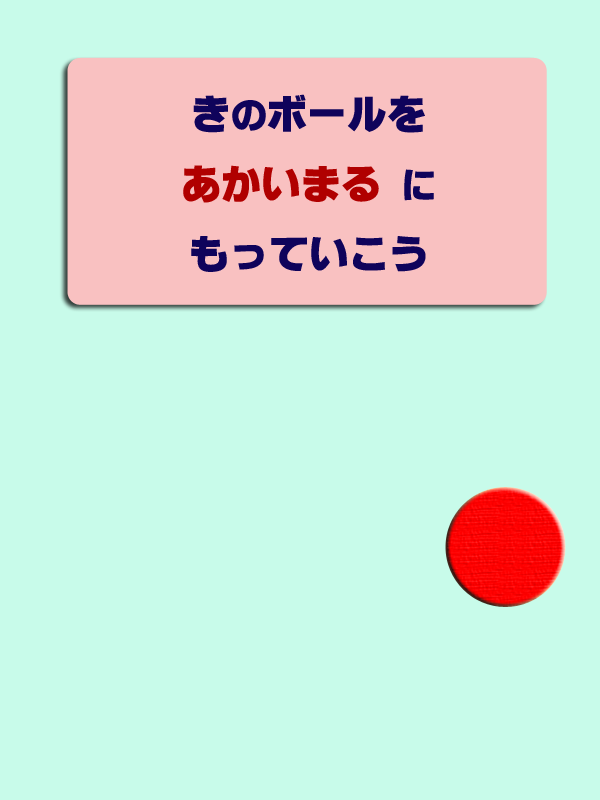
<style>
.page{position:relative;width:600px;height:800px;background:#c8fbea}
.page>*{position:absolute;margin:0}
.t1{font:40px "ÓÝSVbN";color:#0f035b}
.t2{font:36px "ÓÝSVbN";color:#0f035b}
.t3{font:40px "ÓÝSVbN";color:#b00000}
</style>
<div class="page">
<p class="t1" style="left:183px;top:94px;width:251px;height:178px;text-align:center">き<span class="t2">の</span>ボールを<br><span class="t3">あかいまる </span><span class="t2">に<br></span>もっていこう</p>
</div>
